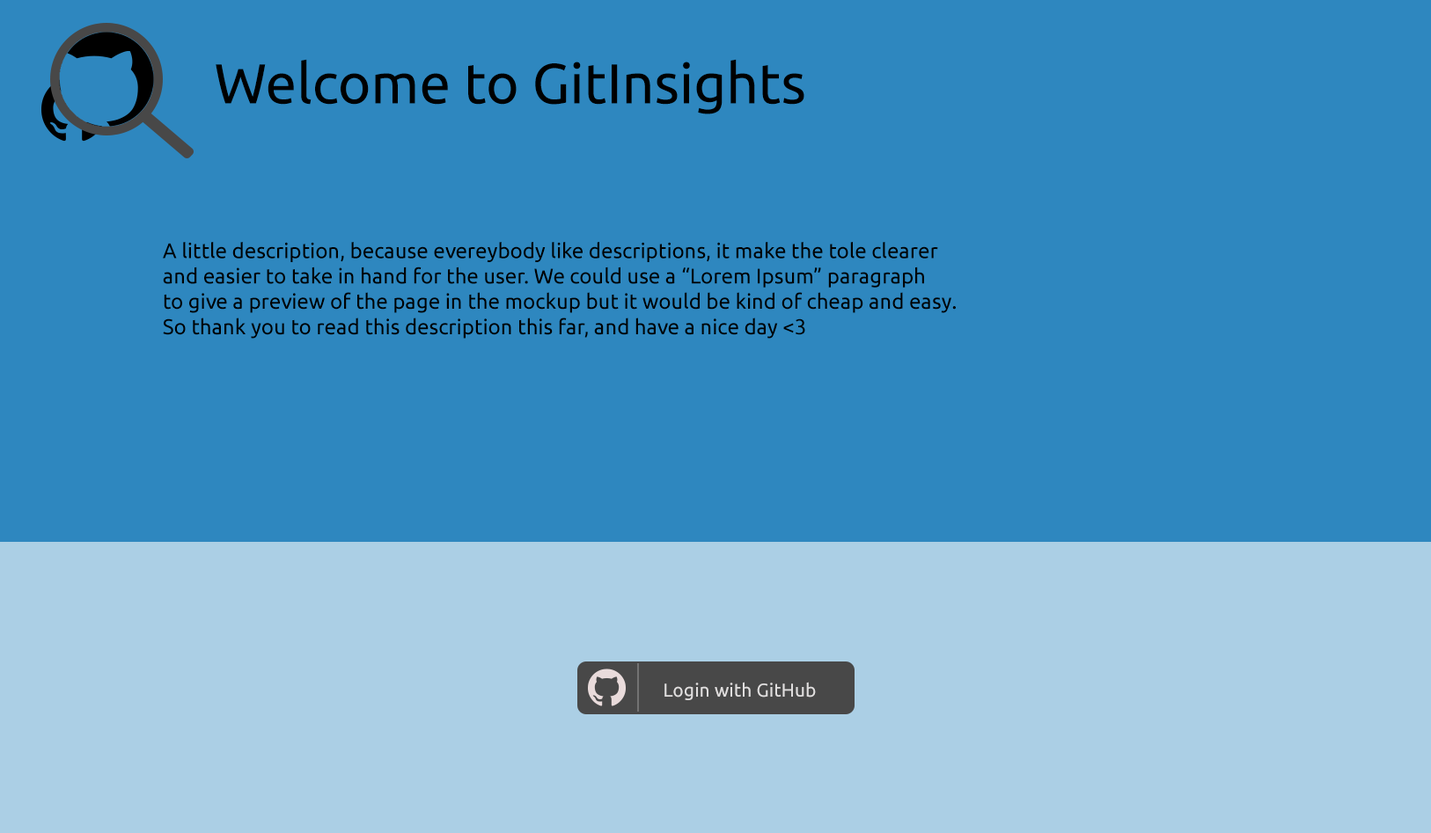
<style>
.page{position:relative;width:1431px;height:833px;background:#2e87bf}
.page>*{position:absolute;margin:0}
.t1{font:56.3px "Ubuntu-Regular";color:#000000}
.t2{font:21.1px "Ubuntu-Regular";color:#000000}
.t3{font:18.8px "Ubuntu-Regular";color:#e0dede}
</style>
<div class="page">
<p class="t1" style="left:216px;top:59px;width:588px;height:55px">Welcome to GitInsights</p>
<p class="t2" style="left:163px;top:242px;width:793px;height:97px">A little description, because evereybody like descriptions, it make the tole clearer<br>and easier to take in hand for the user. We could use a “Lorem Ipsum” paragraph <br>to give a preview of the page in the mockup but it would be kind of cheap and easy.<br>So thank you to read this description this far, and have a nice day &lt;3</p>
<p class="t3" style="left:664px;top:682px;width:152px;height:18px">Login with GitHub</p>
</div>
